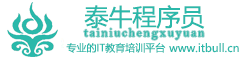
<style>
.page{position:relative;width:245px;height:59px;background:#ffffff}
.page>*{position:absolute;margin:0}
.t1{font:24px "MicrosoftYaHei";color:#2bb8aa}
.t2{font:12px "BellMT";letter-spacing:0.14em;color:#2bb8aa}
.t3{font:10px "MicrosoftYaHei";color:#2bb8aa}
.t4{font:11px "MicrosoftYaHei";color:#2bb8aa}
</style>
<div class="page">
<p class="t1" style="left:84px;top:5px;width:121px;height:24px">泰牛程序员</p>
<p class="t2" style="left:84px;top:28px;width:120px;height:12px">tainiuchengxuyuan</p>
<p class="t3" style="left:66px;top:42px;width:100px;height:11px">专业的IT教育培训平台</p>
<p class="t4" style="left:169px;top:43px;width:70px;height:10px">www.itbull.cn</p>
</div>
